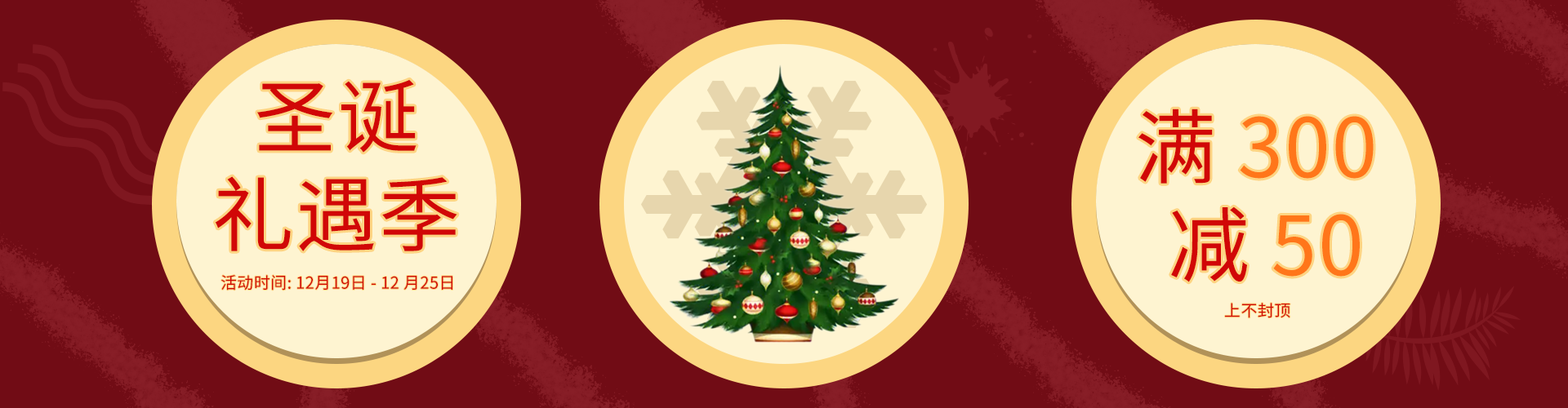
<style>
.page{position:relative;width:1568px;height:408px;background:#710c15}
.page>*{position:absolute;margin:0}
.t1{font:81.7px "SourceHanSansCN-Regular";letter-spacing:0.02em;color:#d10707}
.t2{font:81.7px "SourceHanSansCN-Regular";letter-spacing:0.02em;color:#ff761a}
.t3{font:16.3px "SourceHanSansCN-Regular";letter-spacing:0.02em;color:#d10707}
</style>
<div class="page">
<p class="t1" style="left:215px;top:79px;width:242px;height:173px;text-align:center">圣诞<br>礼遇季</p>
<p class="t2" style="left:1138px;top:109px;width:236px;height:174px;text-align:center"><span class="t1">满 </span>300<span class="t1"> <br>减 </span>50</p>
<p class="t3" style="left:221px;top:275px;width:231px;height:16px">活动时间: 12月19日 - 12 月25日</p>
<p class="t3" style="left:1225px;top:303px;width:65px;height:15px">上不封顶</p>
</div>
